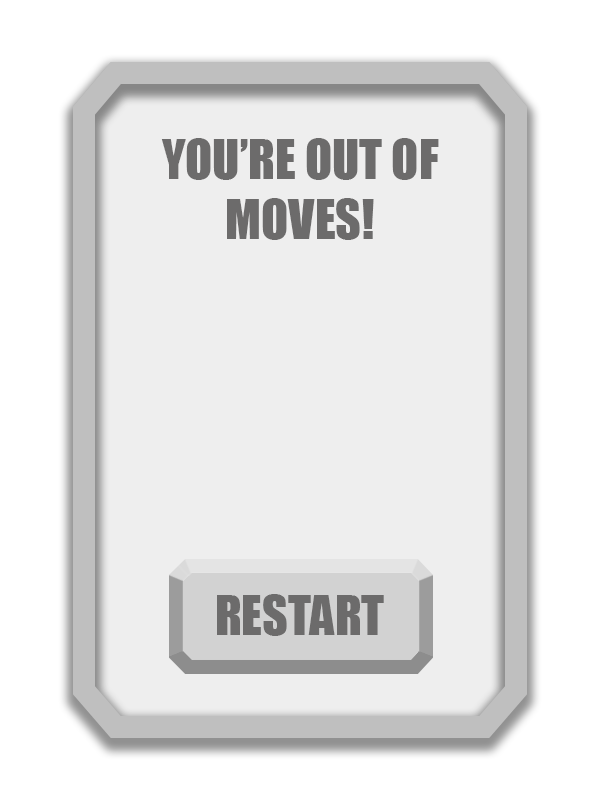
<style>
.page{position:relative;width:600px;height:800px;background:#eeeeee}
.page>*{position:absolute;margin:0}
.t1{font:12px "Impact";color:#6c6b6b}
.t2{font:50px "Impact";color:#6c6b6b}
</style>
<div class="page">
<p class="t1" style="left:161px;top:138px;width:278px;height:102px;text-align:center">YOU’RE OUT OF MOVES!</p>
<p class="t2" style="left:217px;top:594px;width:167px;height:42px">RESTART</p>
</div>
